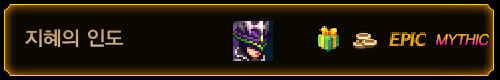
<style>
.page{position:relative;width:500px;height:80px;background:#0a0800}
.page>*{position:absolute;margin:0}
.t1{font:20px "YDIYGO330";color:#cba87f}
.t2{font:15px "YDIYGO330";font-style:italic}
</style>
<div class="page">
<p class="t1" style="left:25px;top:29px;width:99px;height:18px">지혜의 인도</p>
<p class="t2" style="left:436px;top:33px;width:54px;height:13px">MYTHIC</p>
</div>
